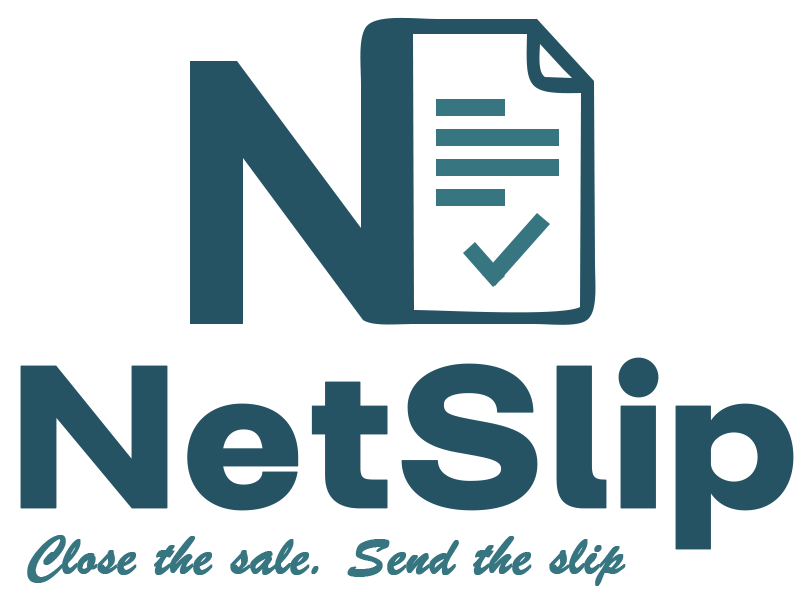
<style>
.page{position:relative;width:810px;height:608px;background:#ffffff}
.page>*{position:absolute;margin:0}
.t1{font:203.2px "FONTSPRINGDEMO-LupioBold";color:#265363;font-weight:bold}
.t2{font:58.1px "BrushScriptMT";color:#377581;font-weight:bold}
</style>
<div class="page">
<p class="t1" style="left:20px;top:357px;width:774px;height:193px">NetSlip</p>
<p class="t2" style="left:27px;top:535px;width:599px;height:51px">Close the sale. Send the slip</p>
</div>
